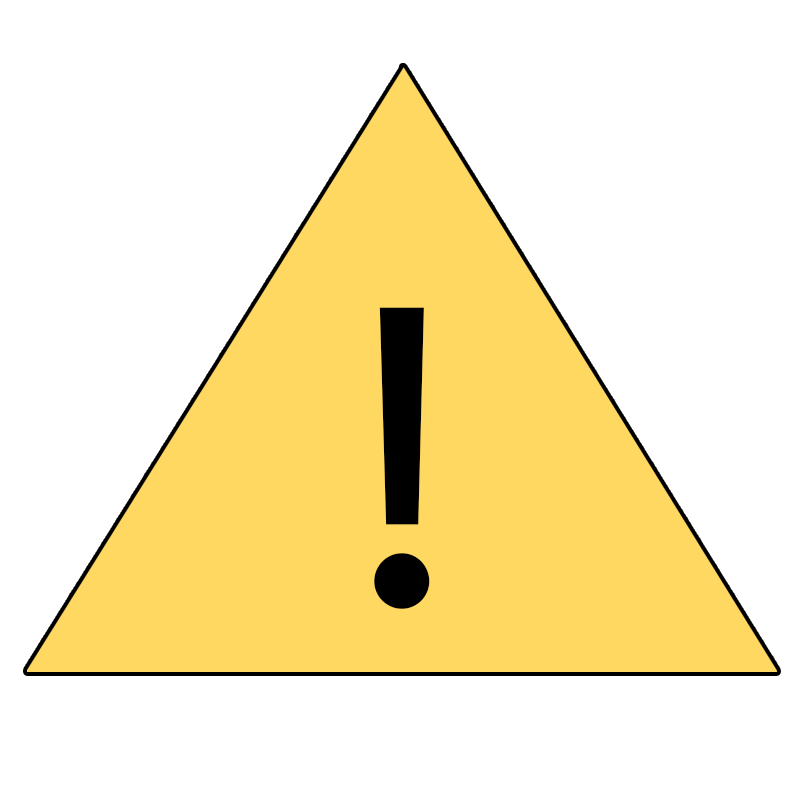
<style>
.page{position:relative;width:800px;height:800px;background:#ffffff}
.page>*{position:absolute;margin:0}
.t1{font:431.3px "Consolas";letter-spacing:-0.02em;color:#000000}
</style>
<div class="page">
<p class="t1" style="left:374px;top:307px;width:56px;height:302px">!</p>
</div>
